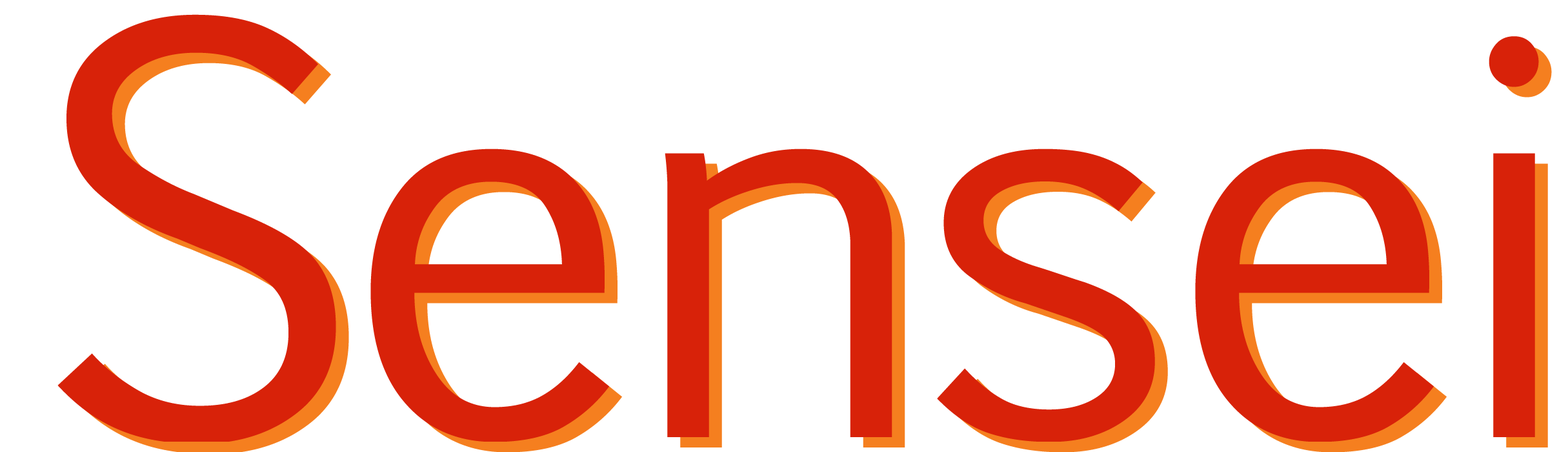
<style>
.page{position:relative;width:1568px;height:452px;background:#ffffff}
.page>*{position:absolute;margin:0}
.t1{font:537.7px "EuphemiaCAS";letter-spacing:-0.025em;color:#d82209}
</style>
<div class="page">
<p class="t1" style="left:57px;top:14px;width:1482px;height:427px">Sensei</p>
<p class="t1" style="left:70px;top:25px;width:1482px;height:427px">Sensei</p>
</div>
